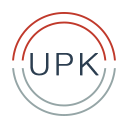
<style>
.page{position:relative;width:128px;height:128px;background:#ffffff}
.page>*{position:absolute;margin:0}
.t1{font:30.7px "HelveticaNeueLTPro-Th";letter-spacing:0.15em;color:#2c3e50;text-transform:uppercase;font-weight:bold}
</style>
<div class="page">
<p class="t1" style="left:30px;top:53px;width:69px;height:23px">UPK</p>
</div>
